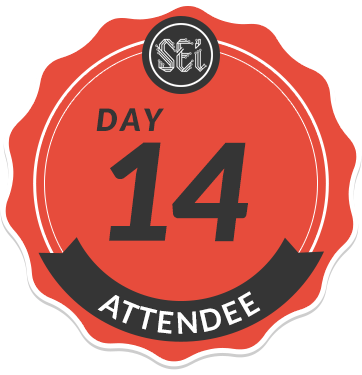
<style>
.page{position:relative;width:362px;height:375px;background:#e74c3c}
.page>*{position:absolute;margin:0}
.t1{font:30.6px/110px "Lato-BlackItalic";letter-spacing:0.14em;color:#353535}
.t2{font:134.6px/110px "Lato-BlackItalic";letter-spacing:-0.02em;color:#353535}
.t3{font:29.7px "Lato-Bold";letter-spacing:0.1em;color:#ffffff}
</style>
<div class="page">
<p class="t1" style="left:96px;top:108px;width:152px;height:134px">DAY<br><span class="t2">14</span></p>
<p class="t3" style="left:97px;top:291px;width:164px;height:43px">ATTENDEE</p>
</div>
